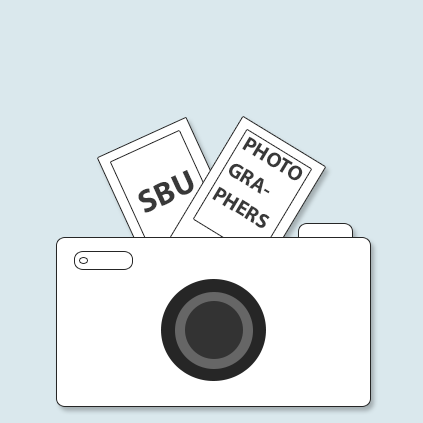
<style>
.page{position:relative;width:423px;height:423px;background:#dae8ed}
.page>*{position:absolute;margin:0}
.t1{font:21px/29.1px "MyriadPro-Bold";color:#393939}
.t2{font:32.3px "MyriadPro-Bold";color:#393939}
</style>
<div class="page">
<p class="t1" style="left:212px;top:136px;width:91px;height:92px;rotate:31deg">PHOTO<br>GRAPHERS</p>
<p class="t2" style="left:138px;top:170px;width:56px;height:43px;rotate:-25deg">SBU</p>
</div>
